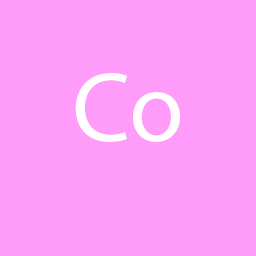
<style>
.page{position:relative;width:256px;height:256px;background:#ff9bf9}
.page>*{position:absolute;margin:0}
.t1{font:100px "MyriadPro-Regular";color:#ffffff}
</style>
<div class="page">
<p class="t1" style="left:75px;top:73px;width:105px;height:69px">Co</p>
</div>
